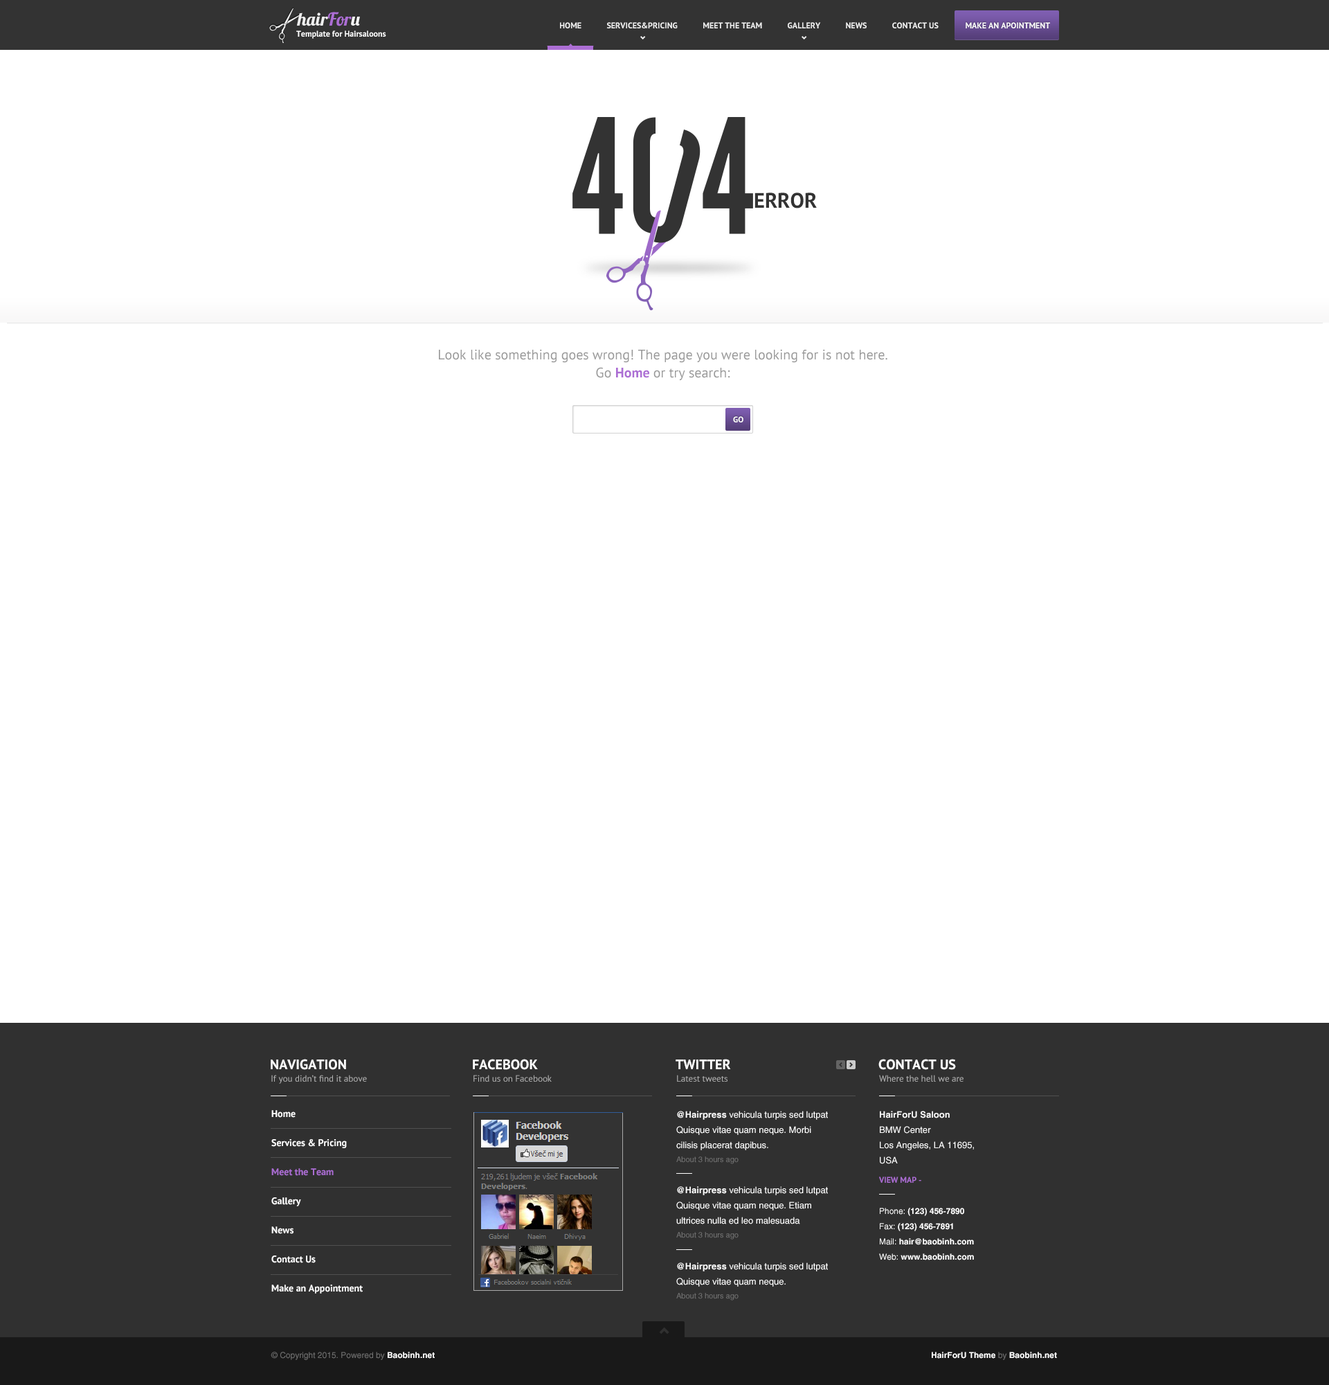
<style>
.page{position:relative;width:1329px;height:1385px;background:#ffffff}
.page>*{position:absolute;margin:0}
.t1{font:18px "Lobster1.3";color:#f0f0f0}
.t2{font:18px "Lobster1.3";color:#ac6ed4}
.t3{font:18px "Lobster1.3";color:#ffffff}
.t4{font:8.3px "PTSans-Bold";color:#f0f0f0;text-transform:uppercase}
.t5{font:8.3px "PTSans-Bold";color:#ffffff;text-transform:uppercase}
.t6{font:8.3px "PTSans-Bold";color:#ffffff}
.t7{font:21.1px "PTSans-Bold";color:#333333}
.t8{font:13.8px/18px "PTSans-Regular";color:#999999}
.t9{font:13.8px/18px "PTSans-Bold";color:#ac6ed4}
.t10{font:13.8px "PTSans-Bold";color:#ffffff}
.t11{font:9px "PTSans-Regular";color:#b4b4b4}
.t12{font:9.7px/29.1px "PTSans-Bold";color:#ffffff}
.t13{font:9.7px/29.1px "PTSans-Bold";color:#ac6ed4}
.t14{font:9px/15.2px "HelveticaLTStd-Roman";color:#ffffff}
.t15{font:9px/15.2px "HelveticaLTStd-Bold";color:#ffffff}
.t16{font:7.6px/13.8px "HelveticaLTStd-Roman";color:#727272}
.t17{font:8.3px/13.8px "PTSans-Bold";color:#ac6ed4}
.t18{font:8.3px/15.2px "HelveticaLTStd-Bold";color:#ffffff}
.t19{font:8.3px/15.2px "HelveticaLTStd-Roman";color:#ffffff}
.t20{font:8.3px "HelveticaLTStd-Roman";color:#727272}
.t21{font:8.3px "HelveticaLTStd-Bold";color:#ffffff}
</style>
<div class="page">
<p class="t1" style="left:297px;top:12px;width:63px;height:14px">hair<span class="t2">For</span><span class="t3">u</span></p>
<p class="t4" style="left:560px;top:22px;width:489px;height:6px">Home            Services&amp;PRICING            Meet the team            Gallery            news            Contact Us            make an apointment</p>
<p class="t5" style="left:966px;top:22px;width:84px;height:6px">make an apointment</p>
<p class="t6" style="left:296px;top:30px;width:90px;height:9px">Template for Hairsaloons</p>
<p class="t7" style="left:755px;top:192px;width:62px;height:16px">ERROR</p>
<p class="t8" style="left:439px;top:349px;width:449px;height:31px;text-align:center">Look like something goes wrong! The page you were looking for is not here.<br>Go <span class="t9">Home </span>or try search:</p>
<p class="t5" style="left:733px;top:416px;width:11px;height:6px">GO</p>
<p class="t10" style="left:271px;top:1059px;width:75px;height:11px">NAVIGATION</p>
<p class="t10" style="left:473px;top:1059px;width:65px;height:11px">FACEBOOK</p>
<p class="t10" style="left:676px;top:1059px;width:55px;height:10px">TWITTER</p>
<p class="t10" style="left:879px;top:1059px;width:77px;height:11px">CONTACT US</p>
<p class="t11" style="left:271px;top:1074px;width:96px;height:9px">If you didn’t find it above</p>
<p class="t11" style="left:474px;top:1074px;width:78px;height:7px">Find us on Facebook</p>
<p class="t11" style="left:677px;top:1074px;width:51px;height:7px">Latest tweets</p>
<p class="t11" style="left:879px;top:1074px;width:85px;height:7px">Where the hell we are</p>
<p class="t12" style="left:271px;top:1110px;width:92px;height:183px">Home<br>Services &amp; Pricing<br><span class="t13">Meet the Team<br></span>Gallery<br>News<br>Contact Us<br>Make an Appointment</p>
<p class="t14" style="left:676px;top:1110px;width:152px;height:54px"><span class="t15">@Hairpress</span> vehicula turpis sed lutpat Quisque vitae quam neque. Morbi cilisis placerat dapibus.<br><span class="t16">About 3 hours ago</span></p>
<p class="t14" style="left:879px;top:1110px;width:95px;height:72px"><span class="t15">HairForU Saloon<br></span>BMW Center<br>Los Angeles, LA 11695, <br>USA<br><span class="t17">VIEW MAP -<br><br></span><span class="t16">About 3 hours ago</span></p>
<p class="t14" style="left:676px;top:1186px;width:152px;height:53px"><span class="t15">@Hairpress</span> vehicula turpis sed lutpat Quisque vitae quam neque. Etiam ultrices nulla ed leo malesuada <br><span class="t16">About 3 hours ago</span></p>
<p class="t18" style="left:879px;top:1207px;width:95px;height:53px"><span class="t19">Phone: </span>(123) 456-7890<br><span class="t19">Fax: </span>(123) 456-7891<br><span class="t19">Mail: </span>hair@baobinh.com<br><span class="t19">Web: </span>www.baobinh.com</p>
<p class="t14" style="left:676px;top:1262px;width:152px;height:38px"><span class="t15">@Hairpress</span> vehicula turpis sed lutpat Quisque vitae quam neque.<br><span class="t16">About 3 hours ago</span></p>
<p class="t20" style="left:271px;top:1351px;width:164px;height:9px">© Copyright 2015. Powered by <span class="t21">Baobinh.net</span></p>
<p class="t21" style="left:932px;top:1351px;width:125px;height:9px">HairForU Theme <span class="t20">by </span>Baobinh.net</p>
</div>
